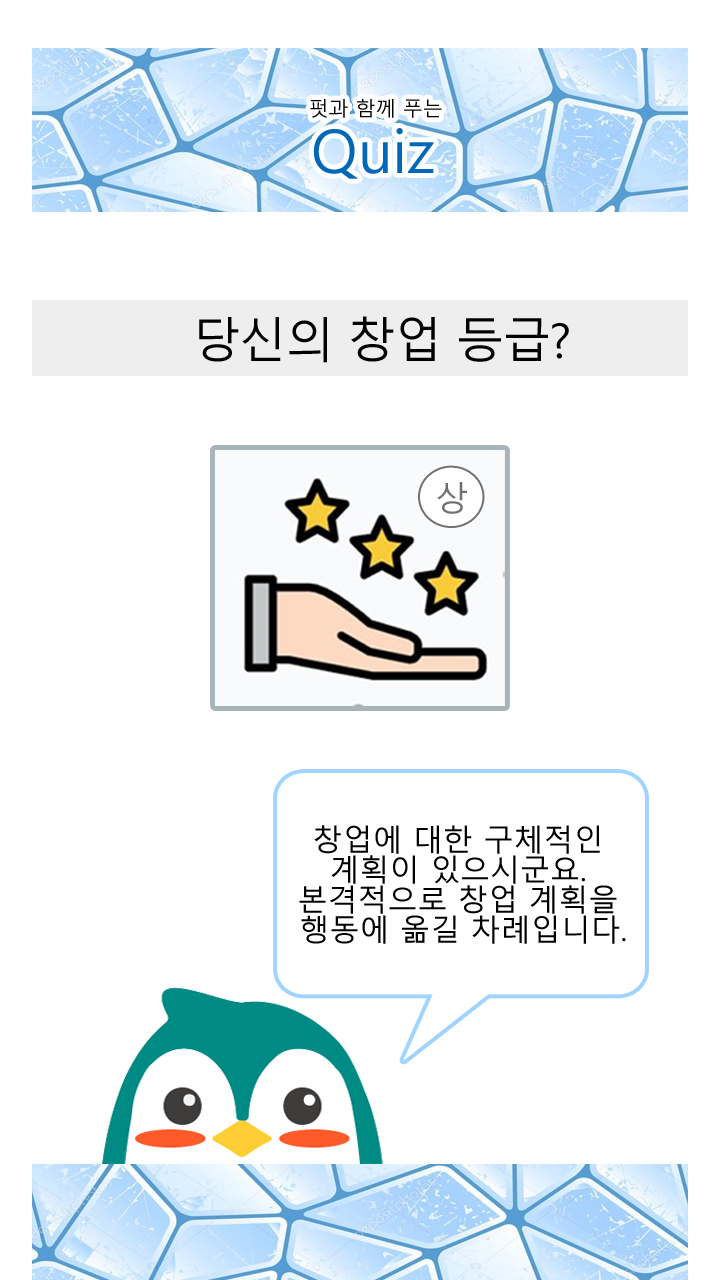
<style>
.page{position:relative;width:720px;height:1280px;background:#ffffff}
.page>*{position:absolute;margin:0}
.t1{font:20px/24px "MalgunGothic";color:#000000}
.t2{font:20px/26px "MalgunGothic";color:#000000}
.t3{font:60px/24px "MalgunGothic";color:#0068b7}
.t4{font:48px "MalgunGothic";letter-spacing:-0.03em;color:#000000}
.t5{font:34px "MalgunGothic";color:#707070}
.t6{font:30px/30px "MalgunGothic";color:#000000}
</style>
<div class="page">
<p class="t1" style="left:310px;top:99px;width:132px;height:80px;text-align:center"><span class="t2">  </span>펏과 함께 푸는 <br><span class="t3">Quiz</span></p>
<p class="t4" style="left:199px;top:316px;width:370px;height:47px">당신의 창업 등급?</p>
<p class="t5" style="left:437px;top:482px;width:30px;height:32px">상</p>
<p class="t6" style="left:299px;top:825px;width:327px;height:119px;text-align:center">창업에 대한 구체적인 <br>계획이 있으시군요. <br>본격적으로 창업 계획을 <br>행동에 옮길 차례입니다.</p>
</div>
